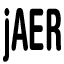
<style>
.page{position:relative;width:64px;height:64px;background:#ffffff}
.page>*{position:absolute;margin:0}
.t1{font:57.2px "HelveticaRoundedLTStd-BdCn";color:#000000;scale:0.58 1}
</style>
<div class="page">
<p class="t1" style="left:3px;top:8px;width:58px;height:54px">jAER</p>
</div>
